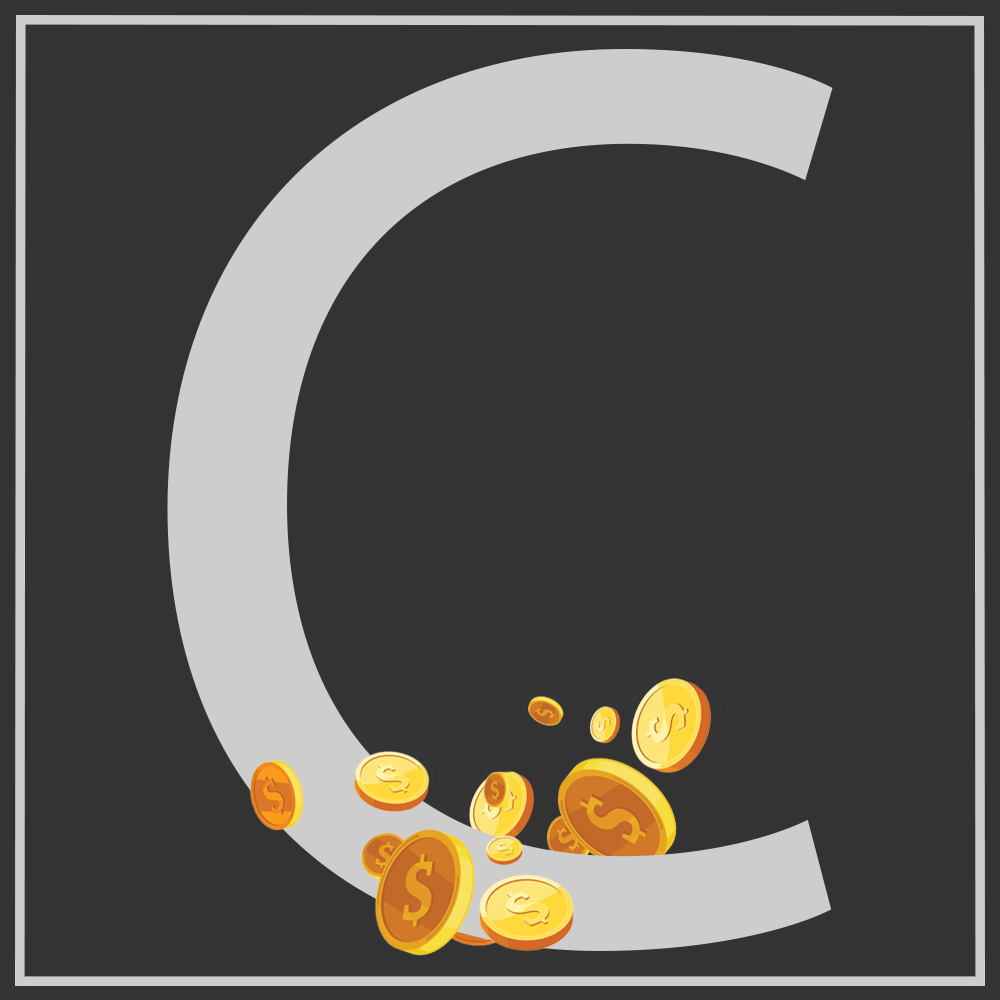
<style>
.page{position:relative;width:1000px;height:1000px;background:#333333}
.page>*{position:absolute;margin:0}
.t1{font:1298.7px "MyriadPro-Regular";color:#cecdcd}
</style>
<div class="page">
<p class="t1" style="left:167px;top:49px;width:666px;height:902px">C</p>
</div>
